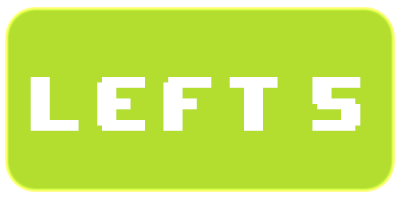
<style>
.page{position:relative;width:400px;height:200px;background:#b3de30}
.page>*{position:absolute;margin:0}
.t1{font:64.3px "8BITWONDERNominal";letter-spacing:0.16em;color:#ffffff;scale:0.89 1}
</style>
<div class="page">
<p class="t1" style="left:30px;top:77px;width:331px;height:54px">LEFT 5</p>
</div>
